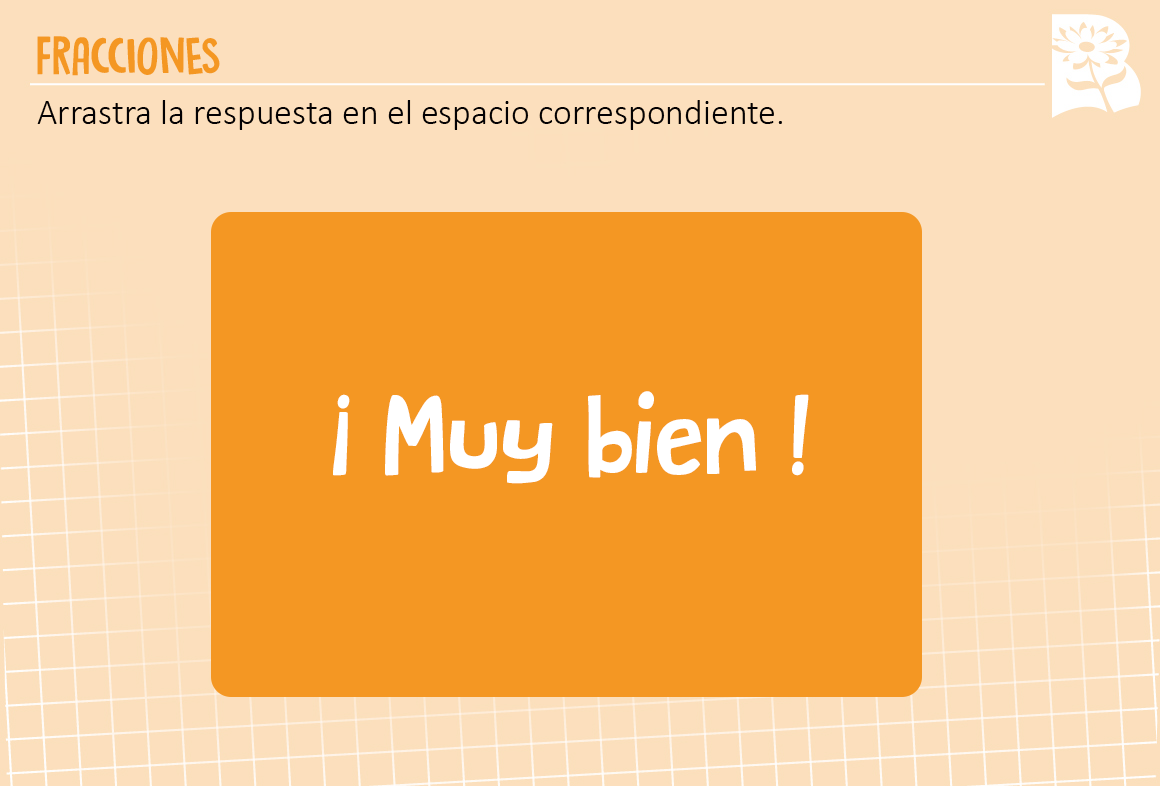
<style>
.page{position:relative;width:1160px;height:786px;background:#fcdfbd}
.page>*{position:absolute;margin:0}
.t1{font:46px "DKButterflyBall";color:#f49723}
.t2{font:36px "Calibri-Light";color:#030104}
.t3{font:100px "DKButterflyBall";color:#ffffff}
</style>
<div class="page">
<p class="t1" style="left:37px;top:36px;width:183px;height:40px">FRACCIONES</p>
<p class="t2" style="left:37px;top:100px;width:745px;height:30px">Arrastra la respuesta en el espacio correspondiente.</p>
<p class="t3" style="left:333px;top:391px;width:476px;height:93px">¡ Muy bien !</p>
</div>
